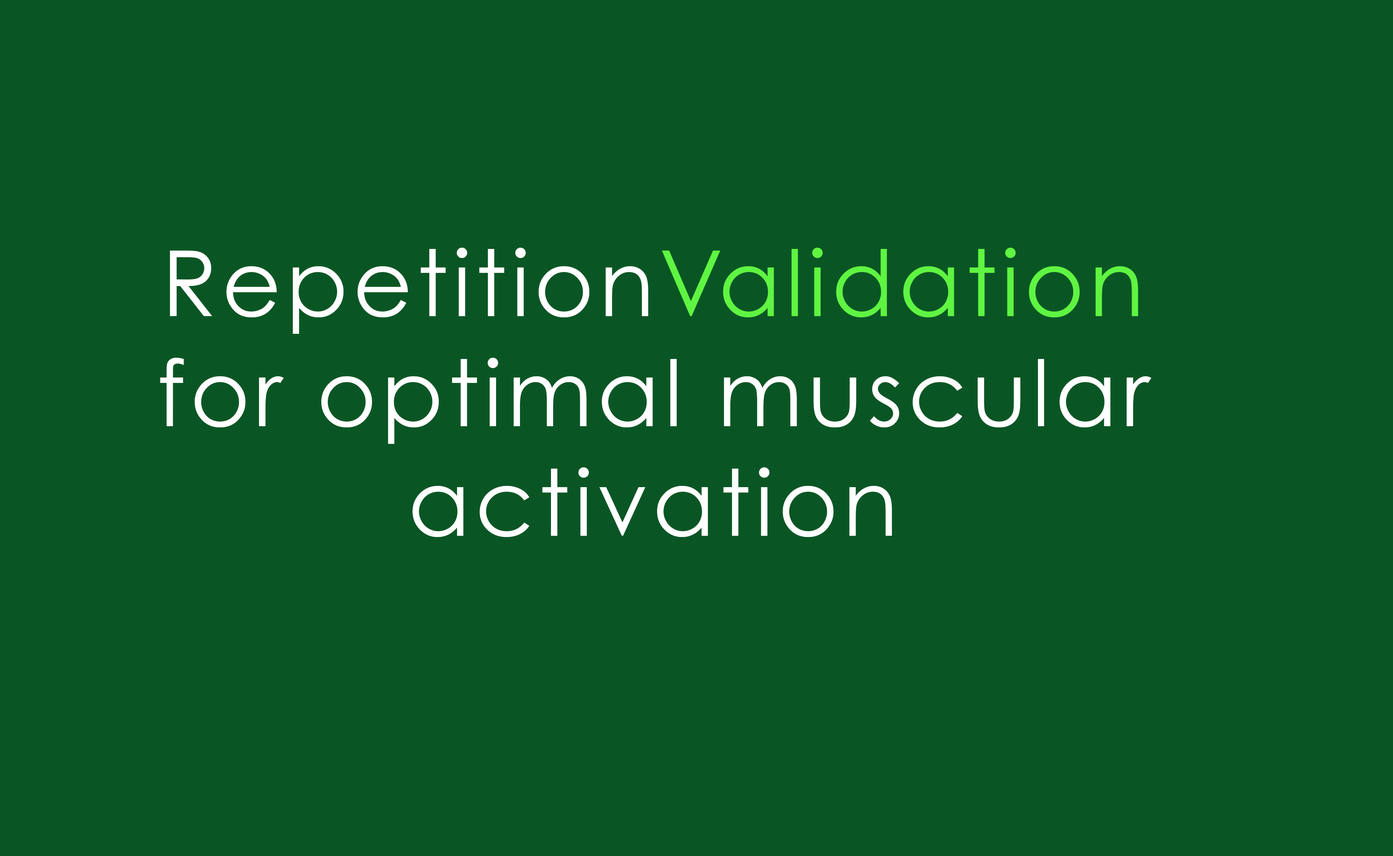
<style>
.page{position:relative;width:1393px;height:856px;background:#095624}
.page>*{position:absolute;margin:0}
.t1{font:91.5px "CenturyGothic";letter-spacing:0.05em;color:#ffffff}
.t2{font:91.5px "CenturyGothic";letter-spacing:0.05em;color:#5ff442}
</style>
<div class="page">
<p class="t1" style="left:160px;top:248px;width:991px;height:289px;text-align:center">Repetition<span class="t2">Validation </span>for optimal muscular activation</p>
</div>
